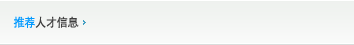
<style>
.page{position:relative;width:354px;height:45px}
.page>*{position:absolute;margin:0}
.t1{font:12px "SimHei";color:#3e3e3e;scale:0.9 1}
.t2{font:12px "SimHei";color:#0099ff;scale:0.9 1}
</style>
<div class="page">
<p class="t1" style="left:13px;top:16px;width:65px;height:12px"><span class="t2">推荐</span>人才信息</p>
</div>
